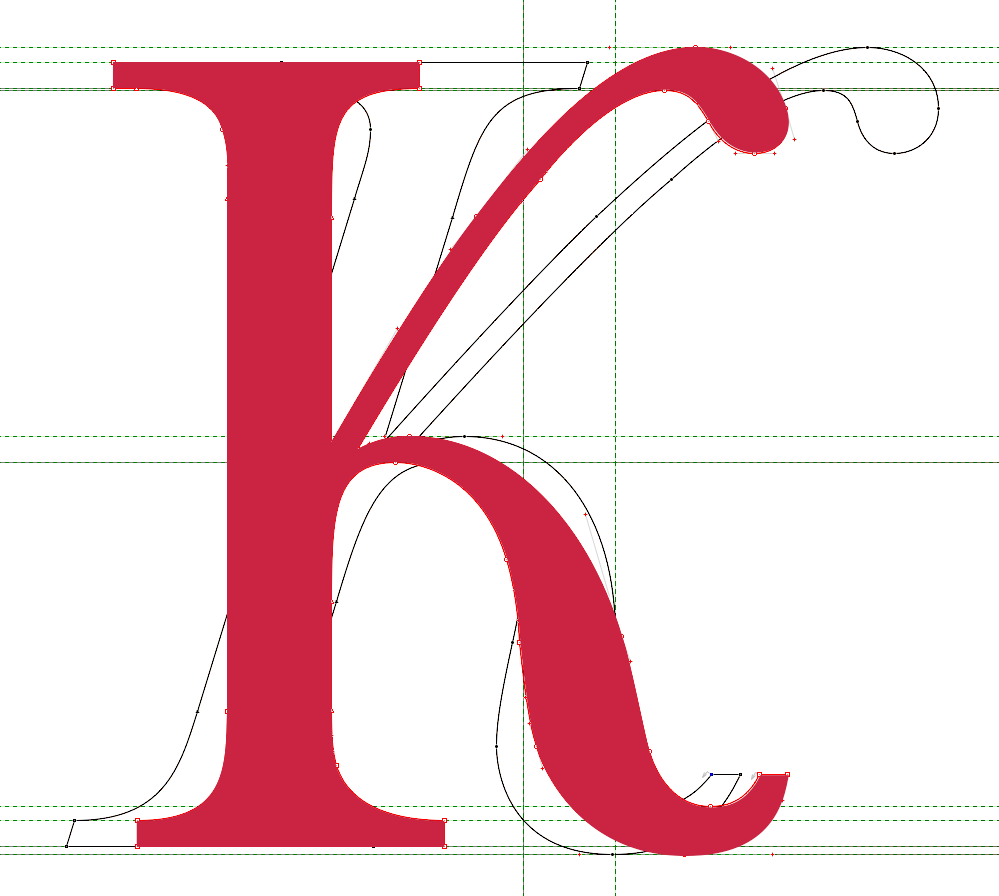
<style>
.page{position:relative;width:999px;height:896px;background:#ffffff}
.page>*{position:absolute;margin:0}
.t1{font:1186.6px "Baskalicaraktuell";color:#cb2443}
</style>
<div class="page">
<p class="t1" style="left:112px;top:47px;width:677px;height:810px">K</p>
</div>
